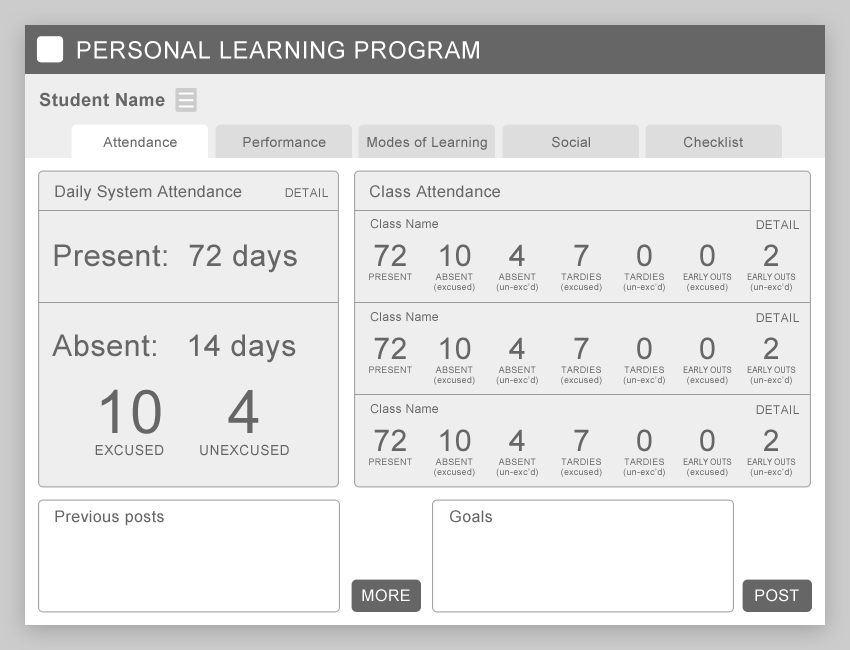
<style>
.page{position:relative;width:850px;height:650px;background:#eeeeee}
.page>*{position:absolute;margin:0}
.t1{font:24px "ArialMT";letter-spacing:0.025em;color:#ffffff}
.t2{font:18px "Arial-BoldMT";letter-spacing:0.025em;color:#666666}
.t3{font:14px "ArialMT";letter-spacing:0.025em;color:#666666}
.t4{font:16px "ArialMT";letter-spacing:0.025em;color:#666666}
.t5{font:12px "ArialMT";letter-spacing:0.025em;color:#666666}
.t6{font:30px "ArialMT";letter-spacing:0.025em;color:#666666}
.t7{font:9px/14px "ArialMT";letter-spacing:0.025em;color:#666666}
.t8{font:30px/14px "ArialMT";letter-spacing:0.025em;color:#666666}
.t9{font:9px/10px "ArialMT";letter-spacing:0.025em;color:#666666}
.t10{font:9px/14px "ArialMT";color:#666666;scale:0.85 1}
.t11{font:14px/22px "ArialMT";letter-spacing:0.025em;color:#666666}
.t12{font:60px/22px "ArialMT";letter-spacing:0.025em;color:#666666}
.t13{font:16px "ArialMT";letter-spacing:0.025em;color:#ffffff}
</style>
<div class="page">
<p class="t1" style="left:77px;top:41px;width:402px;height:18px">PERSONAL LEARNING PROGRAM</p>
<p class="t2" style="left:39px;top:92px;width:126px;height:15px">Student Name</p>
<p class="t3" style="left:103px;top:137px;width:74px;height:10px">Attendance</p>
<p class="t3" style="left:243px;top:137px;width:83px;height:10px">Performance</p>
<p class="t3" style="left:367px;top:137px;width:120px;height:13px">Modes of Learning</p>
<p class="t3" style="left:552px;top:136px;width:38px;height:12px">Social</p>
<p class="t3" style="left:684px;top:136px;width:59px;height:12px">Checklist</p>
<p class="t4" style="left:55px;top:185px;width:187px;height:16px">Daily System Attendance</p>
<p class="t4" style="left:370px;top:185px;width:130px;height:13px">Class Attendance</p>
<p class="t5" style="left:285px;top:188px;width:43px;height:9px">DETAIL</p>
<p class="t5" style="left:370px;top:219px;width:68px;height:10px">Class Name</p>
<p class="t5" style="left:756px;top:220px;width:43px;height:9px">DETAIL</p>
<p class="t6" style="left:54px;top:244px;width:243px;height:29px">Present:  72 days</p>
<p class="t7" style="left:369px;top:244px;width:43px;height:36px;text-align:center"><span class="t8">72<br></span>PRESENT</p>
<p class="t9" style="left:434px;top:244px;width:41px;height:48px;text-align:center"><span class="t8">10<br></span><span class="t7">ABSENT<br></span>(excused)</p>
<p class="t9" style="left:496px;top:244px;width:42px;height:48px;text-align:center"><span class="t8">4<br></span><span class="t7">ABSENT<br></span>(un-exc’d)</p>
<p class="t9" style="left:561px;top:244px;width:41px;height:48px;text-align:center"><span class="t8">7<br></span><span class="t7">TARDIES<br></span>(excused)</p>
<p class="t9" style="left:623px;top:244px;width:42px;height:48px;text-align:center"><span class="t8">0<br></span><span class="t7">TARDIES<br></span>(un-exc’d)</p>
<p class="t10" style="left:683px;top:244px;width:49px;height:48px;text-align:center"><span class="t8">0<br></span>EARLY OUTS<br><span class="t9">(excused)</span></p>
<p class="t10" style="left:747px;top:244px;width:49px;height:48px;text-align:center"><span class="t8">2<br></span>EARLY OUTS<br><span class="t9">(un-exc’d)</span></p>
<p class="t5" style="left:370px;top:312px;width:68px;height:10px">Class Name</p>
<p class="t5" style="left:756px;top:313px;width:43px;height:9px">DETAIL</p>
<p class="t6" style="left:52px;top:334px;width:244px;height:29px">Absent:   14 days</p>
<p class="t7" style="left:369px;top:337px;width:43px;height:36px;text-align:center"><span class="t8">72<br></span>PRESENT</p>
<p class="t9" style="left:434px;top:337px;width:41px;height:48px;text-align:center"><span class="t8">10<br></span><span class="t7">ABSENT<br></span>(excused)</p>
<p class="t9" style="left:496px;top:337px;width:42px;height:48px;text-align:center"><span class="t8">4<br></span><span class="t7">ABSENT<br></span>(un-exc’d)</p>
<p class="t9" style="left:561px;top:337px;width:41px;height:48px;text-align:center"><span class="t8">7<br></span><span class="t7">TARDIES<br></span>(excused)</p>
<p class="t9" style="left:623px;top:337px;width:42px;height:48px;text-align:center"><span class="t8">0<br></span><span class="t7">TARDIES<br></span>(un-exc’d)</p>
<p class="t10" style="left:683px;top:337px;width:49px;height:48px;text-align:center"><span class="t8">0<br></span>EARLY OUTS<br><span class="t9">(excused)</span></p>
<p class="t10" style="left:747px;top:337px;width:49px;height:48px;text-align:center"><span class="t8">2<br></span>EARLY OUTS<br><span class="t9">(un-exc’d)</span></p>
<p class="t11" style="left:95px;top:389px;width:69px;height:67px;text-align:center"><span class="t12">10<br></span>EXCUSED</p>
<p class="t11" style="left:200px;top:390px;width:89px;height:66px;text-align:center"><span class="t12">4<br></span>UNEXCUSED</p>
<p class="t5" style="left:370px;top:404px;width:68px;height:10px">Class Name</p>
<p class="t5" style="left:756px;top:405px;width:43px;height:9px">DETAIL</p>
<p class="t7" style="left:369px;top:429px;width:43px;height:36px;text-align:center"><span class="t8">72<br></span>PRESENT</p>
<p class="t9" style="left:434px;top:429px;width:41px;height:48px;text-align:center"><span class="t8">10<br></span><span class="t7">ABSENT<br></span>(excused)</p>
<p class="t9" style="left:496px;top:429px;width:42px;height:48px;text-align:center"><span class="t8">4<br></span><span class="t7">ABSENT<br></span>(un-exc’d)</p>
<p class="t9" style="left:561px;top:429px;width:41px;height:48px;text-align:center"><span class="t8">7<br></span><span class="t7">TARDIES<br></span>(excused)</p>
<p class="t9" style="left:623px;top:429px;width:42px;height:48px;text-align:center"><span class="t8">0<br></span><span class="t7">TARDIES<br></span>(un-exc’d)</p>
<p class="t10" style="left:683px;top:429px;width:49px;height:48px;text-align:center"><span class="t8">0<br></span>EARLY OUTS<br><span class="t9">(excused)</span></p>
<p class="t10" style="left:747px;top:429px;width:49px;height:48px;text-align:center"><span class="t8">2<br></span>EARLY OUTS<br><span class="t9">(un-exc’d)</span></p>
<p class="t4" style="left:55px;top:510px;width:109px;height:16px">Previous posts</p>
<p class="t4" style="left:450px;top:510px;width:42px;height:13px">Goals</p>
<p class="t13" style="left:362px;top:589px;width:48px;height:13px">MORE</p>
<p class="t13" style="left:755px;top:589px;width:44px;height:13px">POST</p>
</div>
